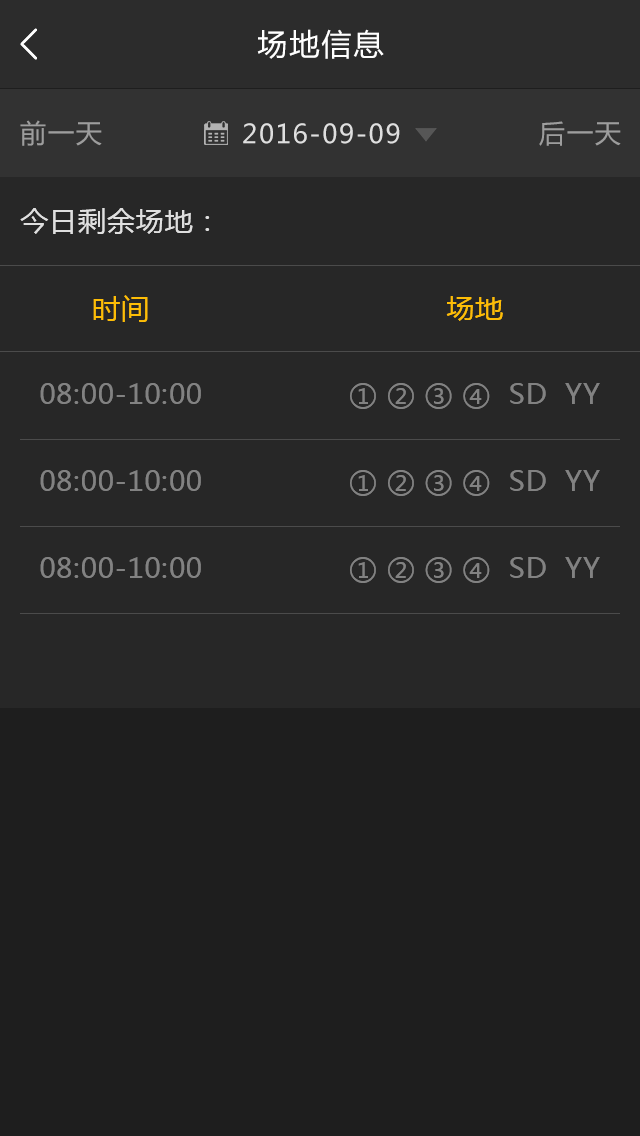
<style>
.page{position:relative;width:640px;height:1136px;background:#272727}
.page>*{position:absolute;margin:0}
.t1{font:30px "MicrosoftYaHei";letter-spacing:0.07em;color:#ffffff}
.t2{font:26px "MicrosoftYaHei";letter-spacing:0.07em;color:#9d9d9d}
.t3{font:26px "MicrosoftYaHei";letter-spacing:0.07em;color:#dfdfdf}
.t4{font:26px "MicrosoftYaHei";letter-spacing:0.07em;color:#9c9c9c}
.t5{font:28px "MicrosoftYaHei";letter-spacing:0.03em;color:#dfdfdf}
.t6{font:28px "MicrosoftYaHei";letter-spacing:0.03em;color:#fdbd06}
.t7{font:28px "MicrosoftYaHei";letter-spacing:0.03em;color:#828282}
</style>
<div class="page">
<p class="t1" style="left:257px;top:29px;width:127px;height:30px">场地信息</p>
<p class="t2" style="left:20px;top:120px;width:82px;height:26px">前一天</p>
<p class="t3" style="left:243px;top:123px;width:157px;height:21px">2016-09-09</p>
<p class="t4" style="left:539px;top:121px;width:82px;height:25px">后一天</p>
<p class="t5" style="left:20px;top:208px;width:190px;height:26px">今日剩余场地：</p>
<p class="t6" style="left:93px;top:295px;width:55px;height:27px">时间</p>
<p class="t6" style="left:446px;top:296px;width:57px;height:25px">场地</p>
<p class="t7" style="left:40px;top:383px;width:161px;height:21px">08:00-10:00</p>
<p class="t7" style="left:350px;top:383px;width:250px;height:26px">① ② ③ ④  SD  YY</p>
<p class="t7" style="left:40px;top:470px;width:161px;height:21px">08:00-10:00</p>
<p class="t7" style="left:350px;top:470px;width:250px;height:26px">① ② ③ ④  SD  YY</p>
<p class="t7" style="left:40px;top:557px;width:161px;height:21px">08:00-10:00</p>
<p class="t7" style="left:350px;top:557px;width:250px;height:26px">① ② ③ ④  SD  YY</p>
</div>
